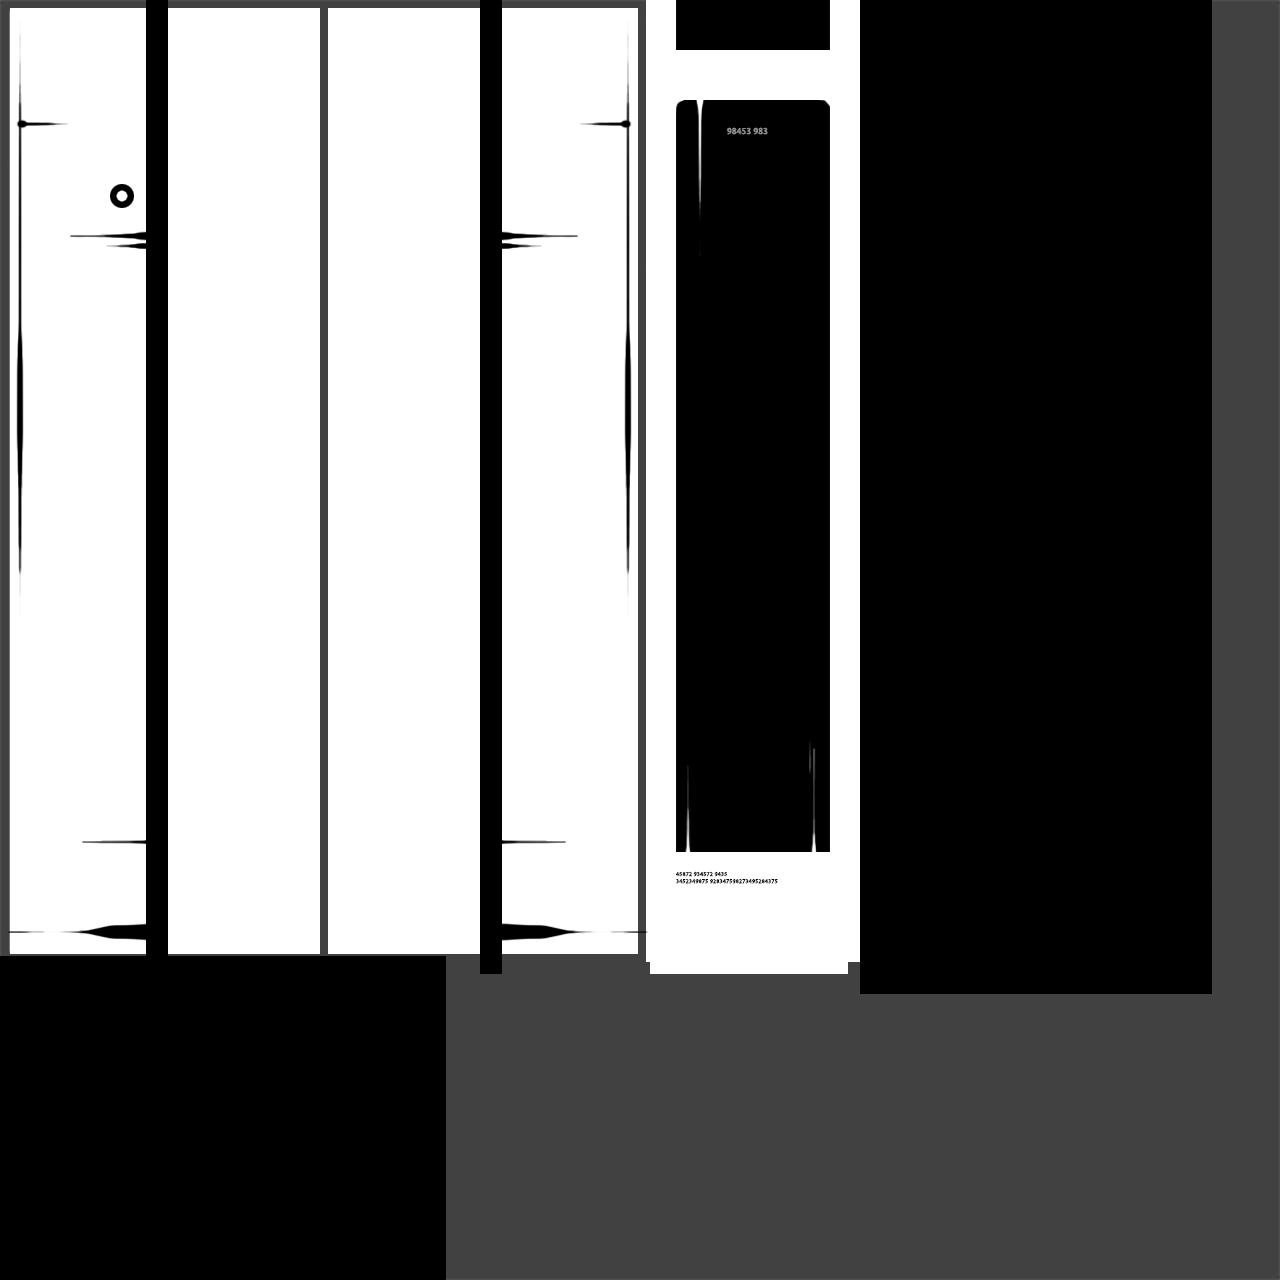
<style>
.page{position:relative;width:1280px;height:1280px;background:#ffffff}
.page>*{position:absolute;margin:0}
.t1{font:9px "MyriadPro-Regular";color:#8d8d8d;font-weight:bold}
.t2{font:6px "MyriadPro-Regular";color:#000000;font-weight:bold}
</style>
<div class="page">
<p class="t1" style="left:727px;top:127px;width:41px;height:8px">98453 983</p>
<p class="t2" style="left:676px;top:871px;width:102px;height:13px">45872 934572 9435<br>3452349875 928347598273495284375</p>
</div>
